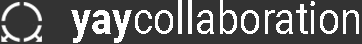
<style>
.page{position:relative;width:362px;height:44px;background:#333333}
.page>*{position:absolute;margin:0}
.t1{font:45px "Roboto-Regular";color:#ffffff;scale:0.86 1}
.t2{font:45px "Roboto-Bold";color:#ffffff;scale:0.86 1}
</style>
<div class="page">
<p class="t1" style="left:71px;top:0px;width:288px;height:43px"><span class="t2">yay</span>collaboration</p>
</div>
